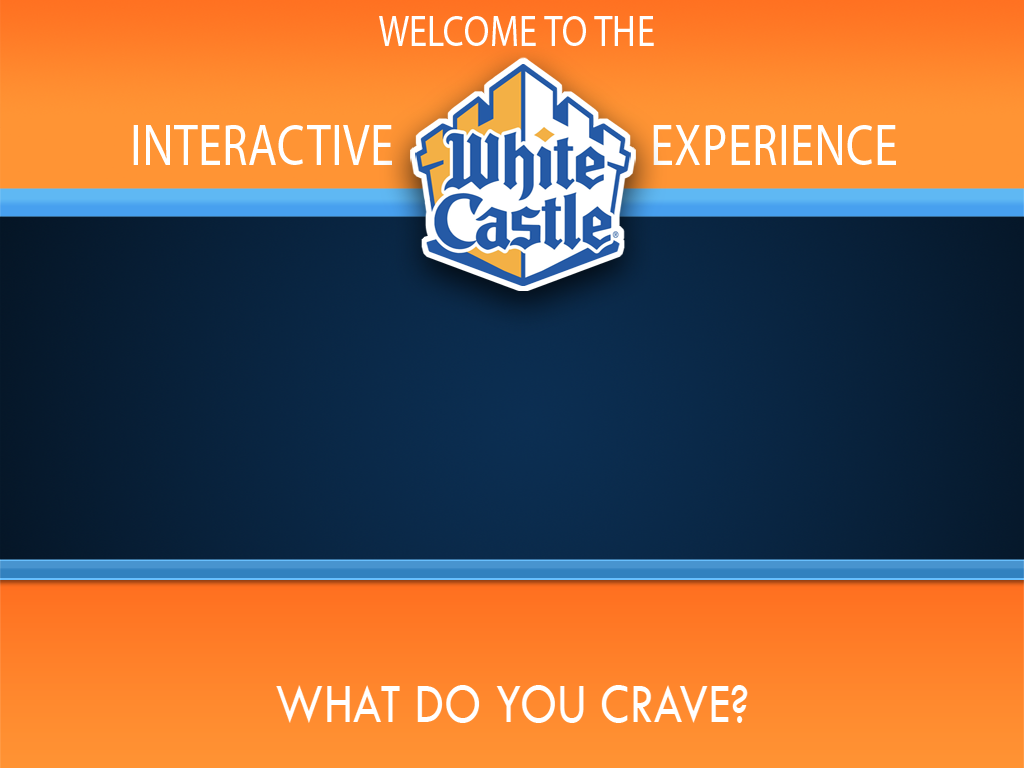
<style>
.page{position:relative;width:1024px;height:768px}
.page>*{position:absolute;margin:0}
.t1{font:44.3px "MyriadPro-Regular";letter-spacing:0.01em;color:#ffffff;font-variant:small-caps;scale:0.82 1}
.t2{font:57.9px "MyriadPro-Regular";letter-spacing:0.01em;color:#ffffff;font-variant:small-caps;scale:0.82 1}
.t3{font:57.9px "TwCenMT-Regular";letter-spacing:0.01em;color:#ffffff;font-variant:small-caps;scale:0.82 1}
</style>
<div class="page">
<p class="t1" style="left:379px;top:16px;width:275px;height:30px">WELCOME TO THE</p>
<p class="t2" style="left:133px;top:125px;width:259px;height:40px">INTERACTIVE</p>
<p class="t2" style="left:653px;top:125px;width:243px;height:40px">EXPERIENCE</p>
<p class="t3" style="left:276px;top:685px;width:472px;height:38px">WHAT DO YOU CRAVE?</p>
</div>
